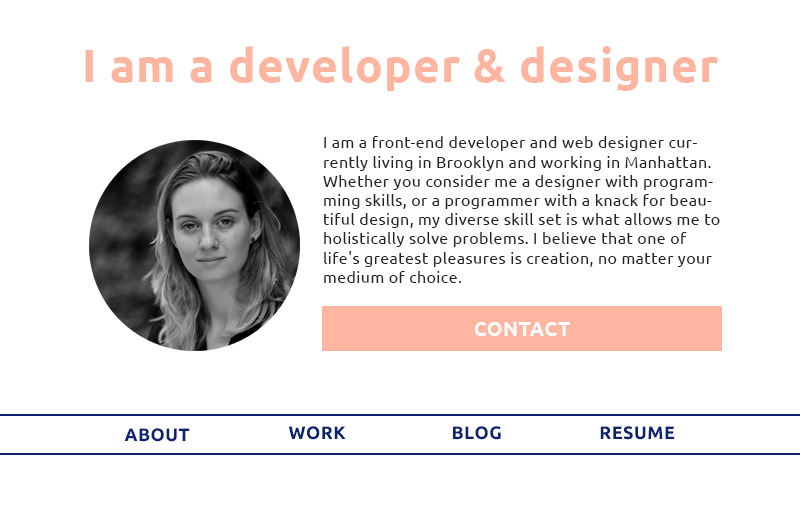
<style>
.page{position:relative;width:800px;height:523px;background:#ffffff}
.page>*{position:absolute;margin:0}
.t1{font:46px "Ubuntu-Bold";letter-spacing:0.025em;color:#ffb59f}
.t2{font:16px "Ubuntu";letter-spacing:0.025em;color:#232323}
.t3{font:20px "Ubuntu-Bold";letter-spacing:0.025em;color:#ffffff}
.t4{font:18px "Ubuntu-Bold";letter-spacing:0.025em;color:#0c2370}
</style>
<div class="page">
<p class="t1" style="left:85px;top:46px;width:633px;height:45px">I am a developer &amp; designer</p>
<p class="t2" style="left:323px;top:136px;width:397px;height:147px">I am a front-end developer and web designer currently living in Brooklyn and working in Manhattan. Whether you consider me a designer with programming skills, or a programmer with a knack for beautiful design, my diverse skill set is what allows me to holistically solve problems. I believe that one of life's greatest pleasures is creation, no matter your medium of choice.</p>
<p class="t3" style="left:474px;top:322px;width:96px;height:14px">CONTACT</p>
<p class="t4" style="left:124px;top:428px;width:66px;height:14px">ABOUT</p>
<p class="t4" style="left:289px;top:426px;width:57px;height:14px">WORK</p>
<p class="t4" style="left:453px;top:426px;width:48px;height:14px">BLOG</p>
<p class="t4" style="left:600px;top:426px;width:75px;height:14px">RESUME</p>
</div>
